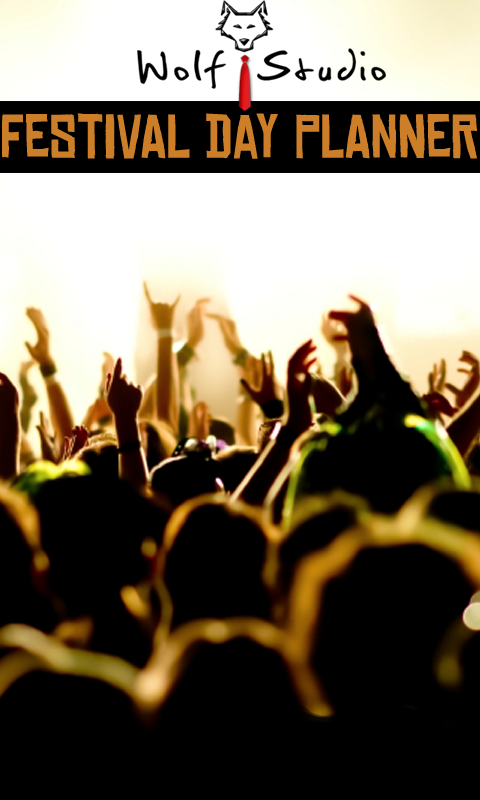
<style>
.page{position:relative;width:480px;height:800px;background:#000000}
.page>*{position:absolute;margin:0}
.t1{font:59px "ChineseRocksRg-Regular";letter-spacing:0.01em;color:#cc7f28}
</style>
<div class="page">
<p class="t1" style="left:2px;top:113px;width:475px;height:46px">FESTIVAL DAY PLANNER</p>
</div>
